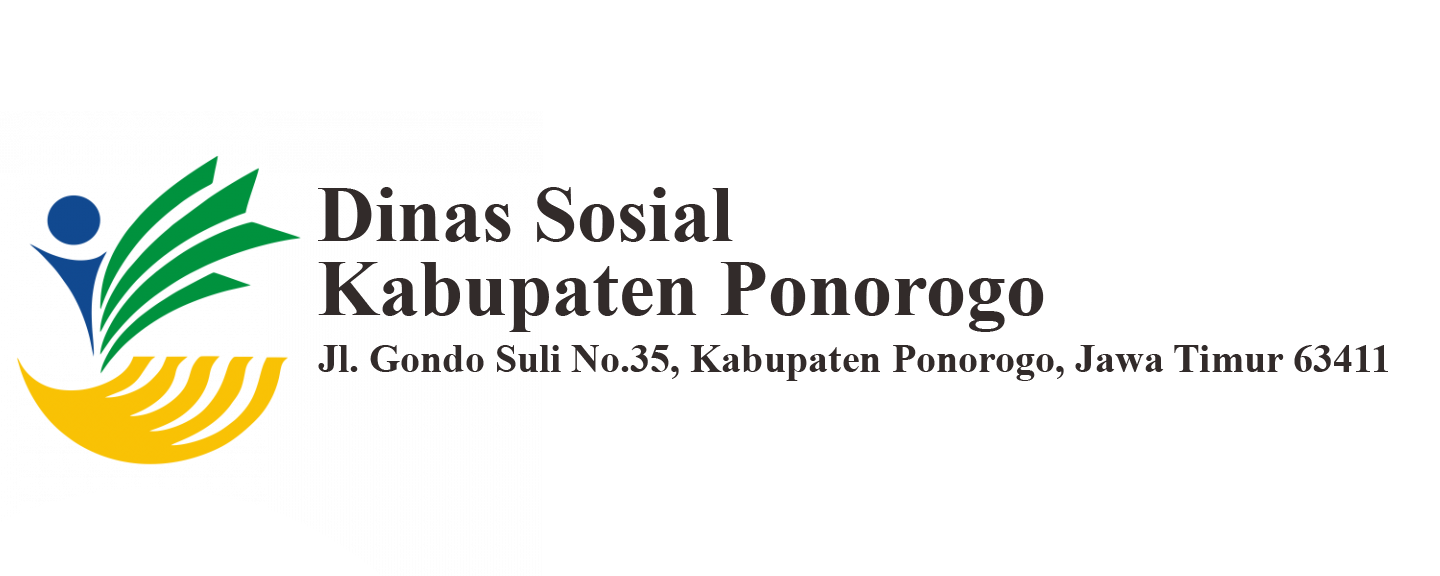
<style>
.page{position:relative;width:1440px;height:576px;background:#ffffff}
.page>*{position:absolute;margin:0}
.t1{font:80px "TimesNewRomanPS-BoldMT";color:#322b2a}
.t2{font:40px "TimesNewRomanPS-BoldMT";color:#322b2a}
</style>
<div class="page">
<p class="t1" style="left:318px;top:187px;width:415px;height:55px">Dinas Sosial</p>
<p class="t1" style="left:318px;top:262px;width:726px;height:70px">Kabupaten Ponorogo</p>
<p class="t2" style="left:318px;top:345px;width:1070px;height:36px">Jl. Gondo Suli No.35, Kabupaten Ponorogo, Jawa Timur 63411</p>
</div>
